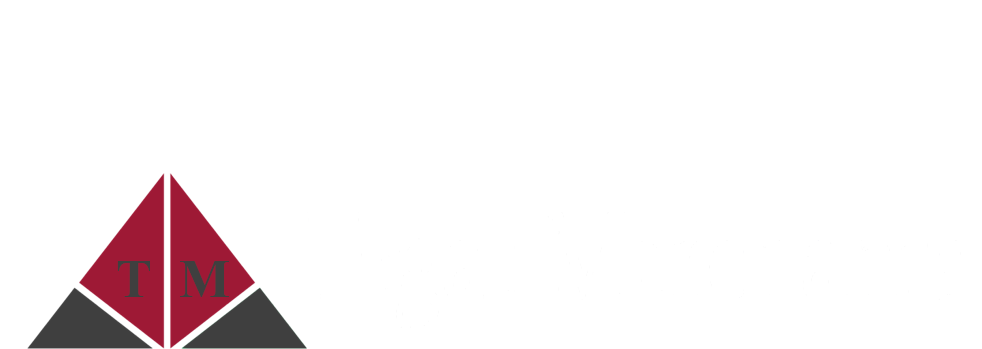
<style>
.page{position:relative;width:982px;height:349px;background:#ffffff}
.page>*{position:absolute;margin:0}
.t1{font:54.2px "TimesNewRomanPS-BoldMT";color:#3f3f3f}
</style>
<div class="page">
<p class="t1" style="left:117px;top:261px;width:112px;height:36px">T  M</p>
</div>
